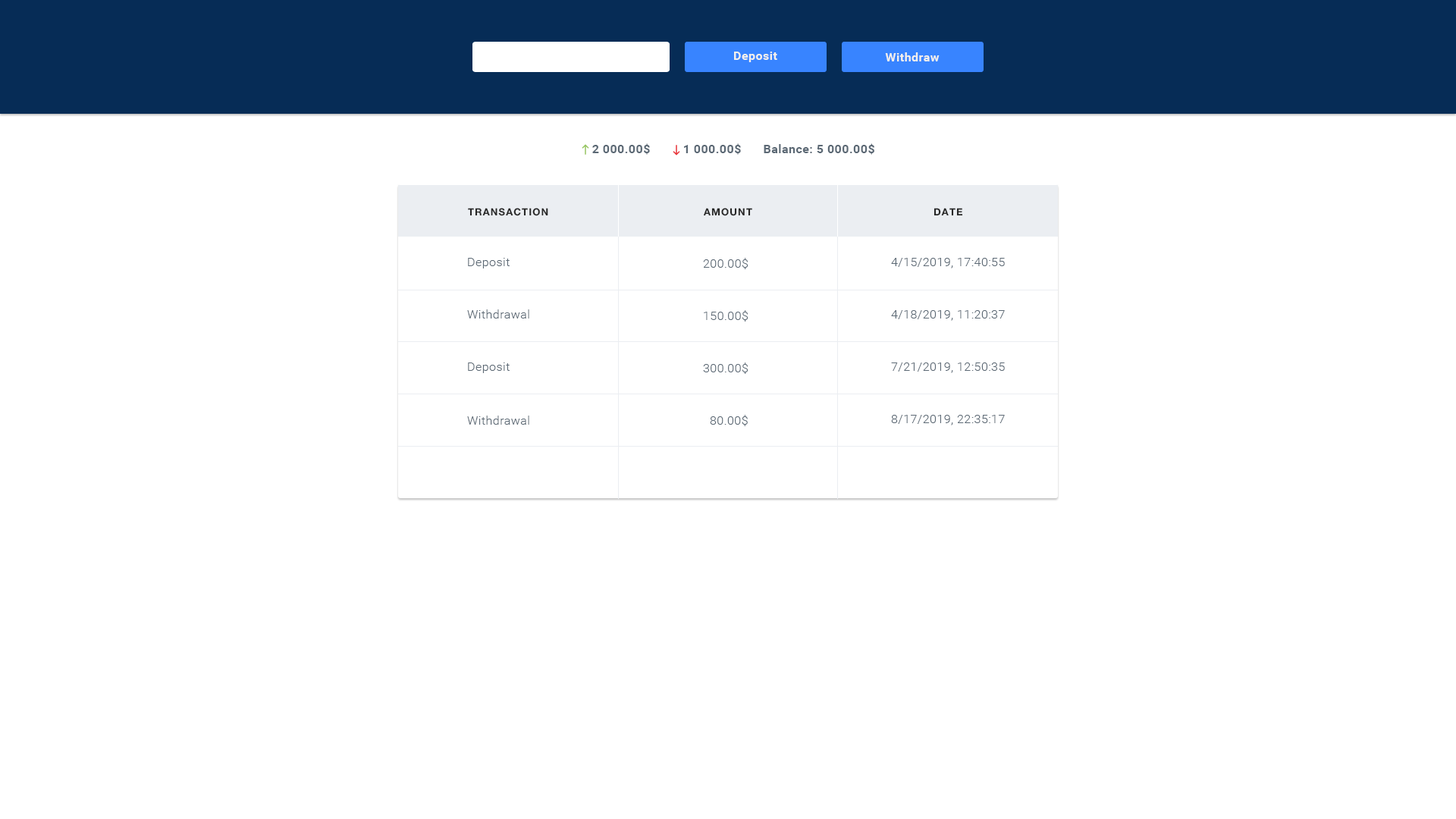
<style>
.page{position:relative;width:1456px;height:819px;background:#ffffff}
.page>*{position:absolute;margin:0}
.t1{font:12.1px "Roboto-Bold";letter-spacing:0.03em;color:#f2efec}
.t2{font:12.1px "Roboto-Bold";letter-spacing:0.03em;color:#5c6975}
.t3{font:9.9px "HelveticaNeueCyr-Bold";letter-spacing:0.09em;color:#272727;text-transform:uppercase}
.t4{font:12.1px "Roboto-Light";letter-spacing:0.03em;color:#5c6975}
</style>
<div class="page">
<p class="t1" style="left:734px;top:52px;width:43px;height:10px">Deposit</p>
<p class="t1" style="left:885px;top:52px;width:55px;height:9px">Withdraw</p>
<p class="t2" style="left:592px;top:143px;width:58px;height:12px">2 000.00$</p>
<p class="t2" style="left:684px;top:143px;width:57px;height:12px">1 000.00$</p>
<p class="t2" style="left:764px;top:143px;width:110px;height:12px">Balance: 5 000.00$</p>
<p class="t3" style="left:468px;top:208px;width:80px;height:8px">Transaction</p>
<p class="t3" style="left:704px;top:208px;width:48px;height:8px">Amount</p>
<p class="t3" style="left:933px;top:208px;width:30px;height:8px">Date</p>
<p class="t4" style="left:468px;top:258px;width:42px;height:10px">Deposit</p>
<p class="t4" style="left:703px;top:258px;width:45px;height:11px">200.00$</p>
<p class="t4" style="left:891px;top:258px;width:114px;height:10px">4/15/2019, 17:40:55</p>
<p class="t4" style="left:467px;top:309px;width:62px;height:9px">Withdrawal</p>
<p class="t4" style="left:704px;top:310px;width:44px;height:12px">150.00$</p>
<p class="t4" style="left:891px;top:310px;width:114px;height:11px">4/18/2019, 11:20:37</p>
<p class="t4" style="left:468px;top:362px;width:42px;height:11px">Deposit</p>
<p class="t4" style="left:703px;top:362px;width:45px;height:12px">300.00$</p>
<p class="t4" style="left:891px;top:362px;width:114px;height:11px">7/21/2019, 12:50:35</p>
<p class="t4" style="left:467px;top:416px;width:62px;height:9px">Withdrawal</p>
<p class="t4" style="left:710px;top:415px;width:38px;height:11px">80.00$</p>
<p class="t4" style="left:891px;top:415px;width:114px;height:10px">8/17/2019, 22:35:17</p>
</div>
